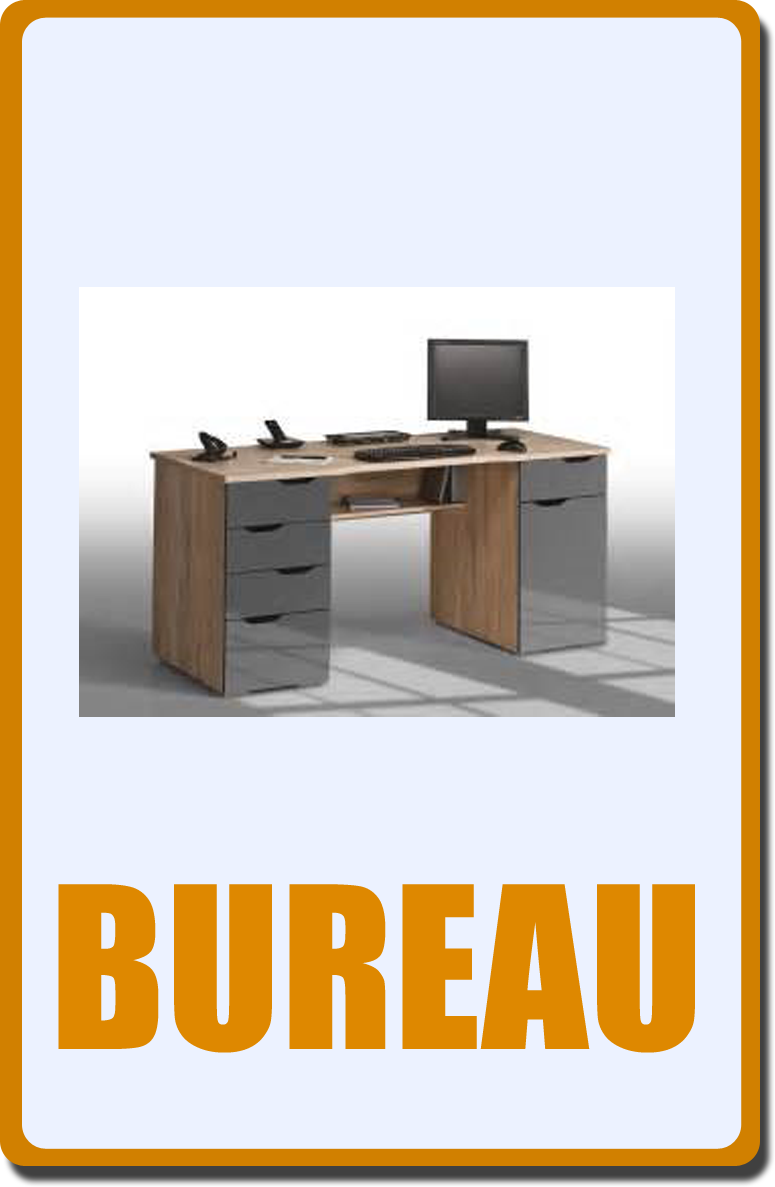
<style>
.page{position:relative;width:775px;height:1187px;background:#ecf2ff}
.page>*{position:absolute;margin:0}
.t1{font:208.3px "Impact";letter-spacing:0.005em;color:#de8800}
</style>
<div class="page">
<p class="t1" style="left:58px;top:884px;width:637px;height:169px">BUREAU</p>
</div>
